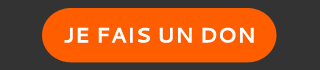
<style>
.page{position:relative;width:320px;height:70px;background:#ff5e00}
.page>*{position:absolute;margin:0}
.t1{font:21px "Cantarell-Bold";letter-spacing:0.01em;color:#ffffff}
</style>
<div class="page">
<p class="t1" style="left:64px;top:27px;width:190px;height:16px">JE FAIS UN DON</p>
</div>
